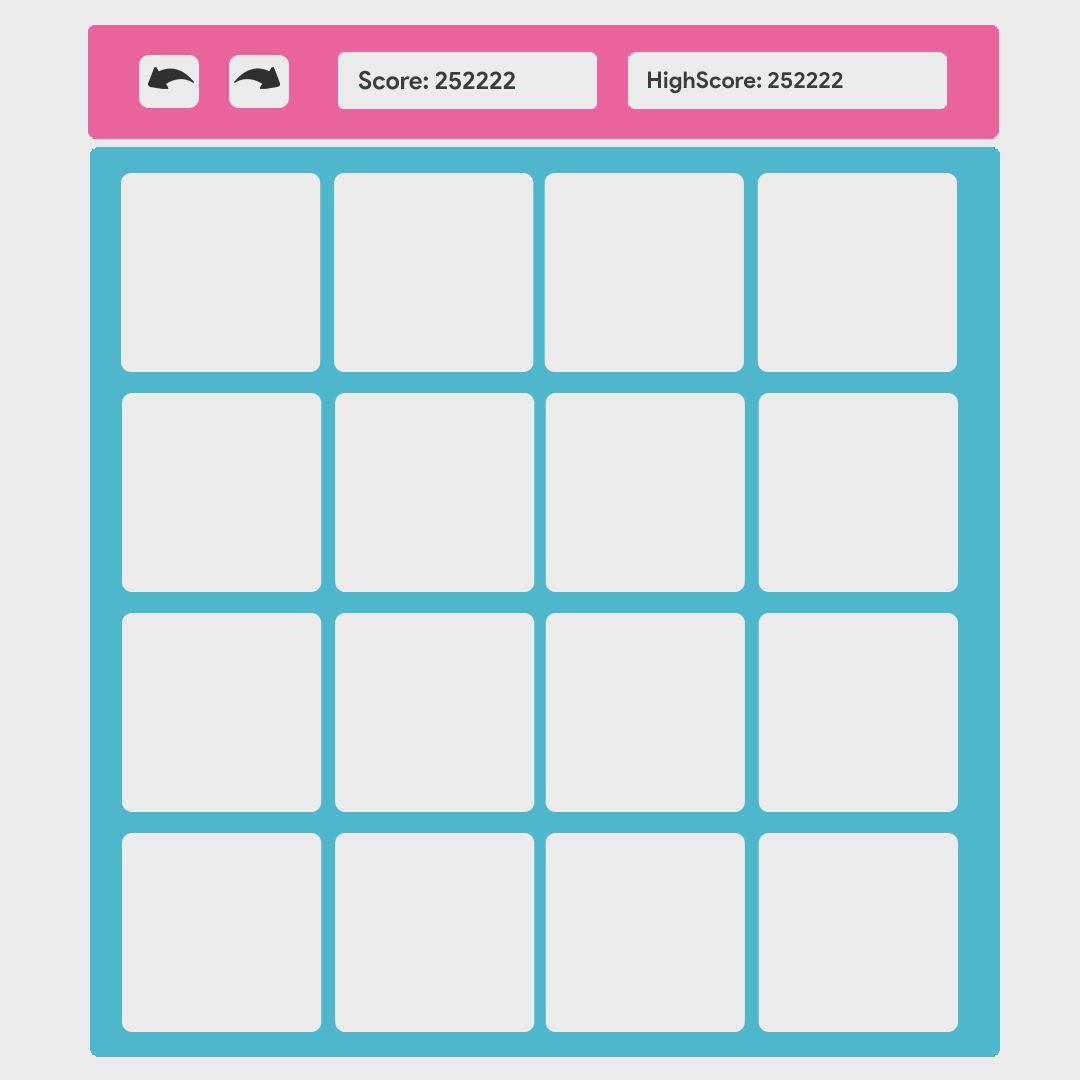
<style>
.page{position:relative;width:1080px;height:1080px;background:#ebebeb}
.page>*{position:absolute;margin:0}
.t1{font:24.6px "ProductSans-Bold";color:#3c3c3c}
.t2{font:23.1px "ProductSans-Bold";color:#3c3c3c}
</style>
<div class="page">
<p class="t1" style="left:358px;top:70px;width:157px;height:20px">Score: 252222</p>
<p class="t2" style="left:648px;top:71px;width:195px;height:23px">HighScore: 252222</p>
</div>
